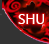
<style>
.page{position:relative;width:49px;height:44px;background:#333333}
.page>*{position:absolute;margin:0}
.t1{font:14px "LaoUI";color:#ffffff}
</style>
<div class="page">
<p class="t1" style="left:18px;top:14px;width:26px;height:10px">SHU</p>
</div>
